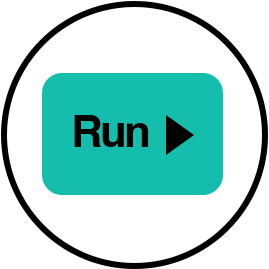
<style>
.page{position:relative;width:269px;height:269px;background:#ffffff}
.page>*{position:absolute;margin:0}
.t1{font:45px "Helvetica-Bold";letter-spacing:-0.06em;color:#000000}
</style>
<div class="page">
<p class="t1" style="left:74px;top:115px;width:75px;height:32px">Run</p>
</div>
